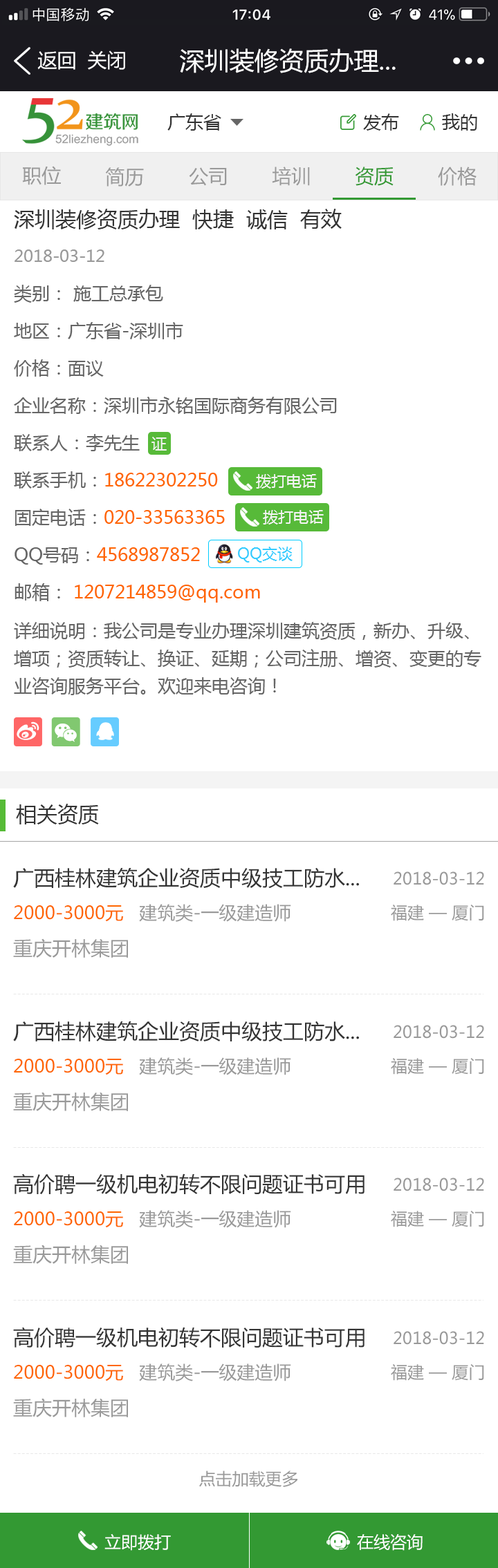
<style>
.page{position:relative;width:498px;height:1568px;background:#ffffff}
.page>*{position:absolute;margin:0}
.t1{font:19.3px "MicrosoftYaHei";color:#ffffff}
.t2{font:24.9px "MicrosoftYaHei";color:#ffffff}
.t3{font:18px "MicrosoftYaHei";color:#333333}
.t4{font:19.3px "MicrosoftYaHei";color:#999999}
.t5{font:19.3px "MicrosoftYaHei";color:#339933}
.t6{font:20.7px "MicrosoftYaHei";color:#333333}
.t7{font:16.6px "MicrosoftYaHei";color:#999999}
.t8{font:18px/37.3px "MicrosoftYaHei";color:#666666}
.t9{font:18px/37.3px "MicrosoftYaHei";color:#ff6600}
.t10{font:15.2px "MicrosoftYaHei";color:#f4f4f4}
.t11{font:15.2px "MicrosoftYaHei";color:#33ccff}
.t12{font:18px/27.6px "MicrosoftYaHei";color:#666666}
.t13{font:18px "MicrosoftYaHei";color:#ff6600}
.t14{font:18px "MicrosoftYaHei";color:#999999}
.t15{font:16.6px "MicrosoftYaHei";color:#ffffff}
</style>
<div class="page">
<p class="t1" style="left:37px;top:51px;width:38px;height:19px">返回</p>
<p class="t1" style="left:88px;top:50px;width:37px;height:20px">关闭</p>
<p class="t2" style="left:180px;top:48px;width:215px;height:25px">深圳装修资质办理...</p>
<p class="t3" style="left:167px;top:113px;width:54px;height:18px">广东省</p>
<p class="t3" style="left:363px;top:113px;width:36px;height:18px">发布</p>
<p class="t3" style="left:442px;top:113px;width:35px;height:18px">我的</p>
<p class="t4" style="left:22px;top:166px;width:39px;height:19px">职位</p>
<p class="t4" style="left:105px;top:167px;width:39px;height:20px">简历</p>
<p class="t4" style="left:189px;top:167px;width:38px;height:19px">公司</p>
<p class="t4" style="left:272px;top:167px;width:38px;height:19px">培训</p>
<p class="t5" style="left:355px;top:167px;width:38px;height:19px">资质</p>
<p class="t4" style="left:437px;top:167px;width:39px;height:19px">价格</p>
<p class="t6" style="left:14px;top:209px;width:327px;height:20px">深圳装修资质办理  快捷  诚信  有效</p>
<p class="t7" style="left:15px;top:249px;width:89px;height:13px">2018-03-12</p>
<p class="t8" style="left:14px;top:285px;width:323px;height:318px">类别： 施工总承包<br>地区：广东省-深圳市<br>价格：面议<br>企业名称：深圳市永铭国际商务有限公司<br>联系人：李先生<br>联系手机：<span class="t9">18622302250<br></span>固定电话：<span class="t9">020-33563365<br></span>QQ号码：<span class="t9">4568987852<br></span>邮箱： <span class="t9">1207214859@qq.com</span></p>
<p class="t10" style="left:151px;top:437px;width:16px;height:14px">证</p>
<p class="t10" style="left:256px;top:474px;width:61px;height:15px">拨打电话</p>
<p class="t10" style="left:263px;top:510px;width:60px;height:15px">拨打电话</p>
<p class="t11" style="left:238px;top:547px;width:54px;height:16px">QQ交谈</p>
<p class="t12" style="left:14px;top:622px;width:467px;height:73px">详细说明：我公司是专业办理深圳建筑资质，新办、升级、增项；资质转让、换证、延期；公司注册、增资、变更的专业咨询服务平台。欢迎来电咨询！</p>
<p class="t6" style="left:16px;top:804px;width:83px;height:20px">相关资质</p>
<p class="t6" style="left:13px;top:867px;width:346px;height:22px">广西桂林建筑企业资质中级技工防水...</p>
<p class="t7" style="left:393px;top:871px;width:91px;height:14px">2018-03-12</p>
<p class="t13" style="left:14px;top:904px;width:277px;height:18px">2000-3000元<span class="t14">   建筑类-一级建造师</span></p>
<p class="t7" style="left:390px;top:905px;width:94px;height:16px">福建 — 厦门</p>
<p class="t4" style="left:13px;top:938px;width:115px;height:20px">重庆开林集团</p>
<p class="t6" style="left:13px;top:1021px;width:346px;height:21px">广西桂林建筑企业资质中级技工防水...</p>
<p class="t7" style="left:393px;top:1025px;width:91px;height:14px">2018-03-12</p>
<p class="t13" style="left:14px;top:1057px;width:277px;height:18px">2000-3000元<span class="t14">   建筑类-一级建造师</span></p>
<p class="t7" style="left:390px;top:1058px;width:94px;height:17px">福建 — 厦门</p>
<p class="t4" style="left:13px;top:1092px;width:115px;height:19px">重庆开林集团</p>
<p class="t6" style="left:13px;top:1173px;width:351px;height:22px">高价聘一级机电初转不限问题证书可用</p>
<p class="t7" style="left:393px;top:1178px;width:91px;height:13px">2018-03-12</p>
<p class="t13" style="left:14px;top:1210px;width:277px;height:18px">2000-3000元<span class="t14">   建筑类-一级建造师</span></p>
<p class="t7" style="left:390px;top:1211px;width:94px;height:16px">福建 — 厦门</p>
<p class="t4" style="left:13px;top:1245px;width:115px;height:19px">重庆开林集团</p>
<p class="t6" style="left:13px;top:1327px;width:351px;height:21px">高价聘一级机电初转不限问题证书可用</p>
<p class="t7" style="left:393px;top:1331px;width:91px;height:14px">2018-03-12</p>
<p class="t13" style="left:14px;top:1363px;width:277px;height:18px">2000-3000元<span class="t14">   建筑类-一级建造师</span></p>
<p class="t7" style="left:390px;top:1364px;width:94px;height:17px">福建 — 厦门</p>
<p class="t4" style="left:13px;top:1398px;width:115px;height:19px">重庆开林集团</p>
<p class="t7" style="left:199px;top:1471px;width:98px;height:16px">点击加载更多</p>
<p class="t15" style="left:104px;top:1533px;width:67px;height:18px">立即拨打</p>
<p class="t15" style="left:357px;top:1534px;width:65px;height:17px">在线咨询</p>
</div>
